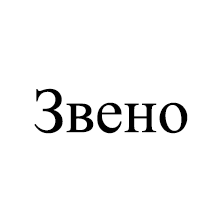
<style>
.page{position:relative;width:221px;height:221px;background:#ffffff}
.page>*{position:absolute;margin:0}
.t1{font:63.9px "TimesNewRomanPSMT";color:#000000}
</style>
<div class="page">
<p class="t1" style="left:34px;top:88px;width:154px;height:46px">Звено</p>
</div>
